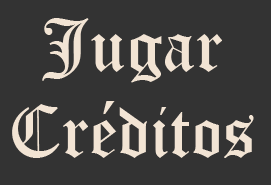
<style>
.page{position:relative;width:271px;height:185px;background:#333333}
.page>*{position:absolute;margin:0}
.t1{font:72px "OldEnglishTextMT";color:#f2e4d4}
</style>
<div class="page">
<p class="t1" style="left:12px;top:18px;width:242px;height:140px;text-align:center">Jugar<br>Créditos</p>
</div>
